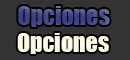
<style>
.page{position:relative;width:130px;height:60px;background:#333333}
.page>*{position:absolute;margin:0}
.t1{font:24px "Impact";color:#464987}
.t2{font:24px "Impact";color:#fdf8e2}
</style>
<div class="page">
<p class="t1" style="left:18px;top:6px;width:92px;height:21px">Opciones</p>
<p class="t2" style="left:17px;top:33px;width:92px;height:21px">Opciones</p>
</div>
